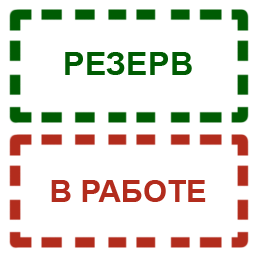
<style>
.page{position:relative;width:256px;height:256px;background:#ffffff}
.page>*{position:absolute;margin:0}
.t1{font:55.5px "Arial-BoldMT";color:#005c03}
.t2{font:53px "Arial-BoldMT";color:#b22c1d}
</style>
<div class="page">
<p class="t1" style="left:65px;top:52px;width:127px;height:23px">РЕЗЕРВ</p>
<p class="t2" style="left:51px;top:180px;width:155px;height:22px">В РАБОТЕ</p>
</div>
